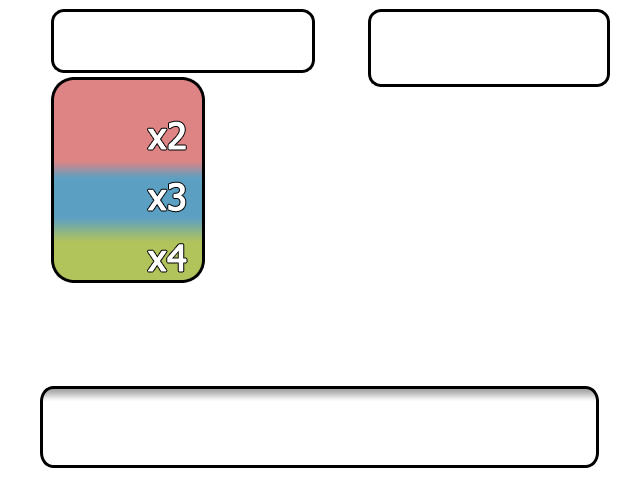
<style>
.page{position:relative;width:640px;height:480px;background:#ffffff}
.page>*{position:absolute;margin:0}
.t1{font:36px/61px "Tahoma";color:#ffffff;font-weight:bold}
</style>
<div class="page">
<p class="t1" style="left:148px;top:121px;width:39px;height:151px;text-align:center">x2<br>x3<br>x4</p>
</div>
